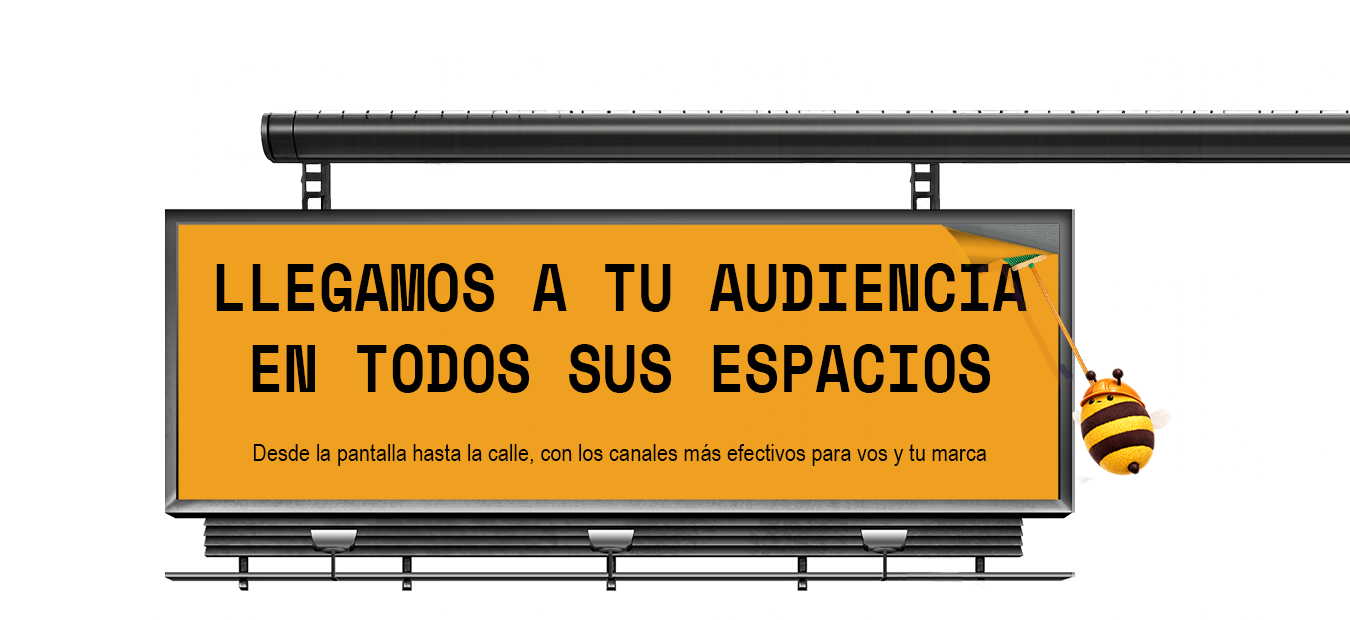
<style>
.page{position:relative;width:1350px;height:620px;background:#ffffff}
.page>*{position:absolute;margin:0}
.t1{font:67.4px "SpaceMono-Bold";color:#000000;scale:0.86 1}
.t2{font:24.4px "ArialNarrow";color:#000000}
</style>
<div class="page">
<p class="t1" style="left:216px;top:263px;width:811px;height:130px;text-align:center">LLEGAMOS A TU AUDIENCIA<br>EN TODOS SUS ESPACIOS</p>
<p class="t2" style="left:253px;top:444px;width:733px;height:22px">Desde la pantalla hasta la calle, con los canales más efectivos para vos y tu marca</p>
</div>
